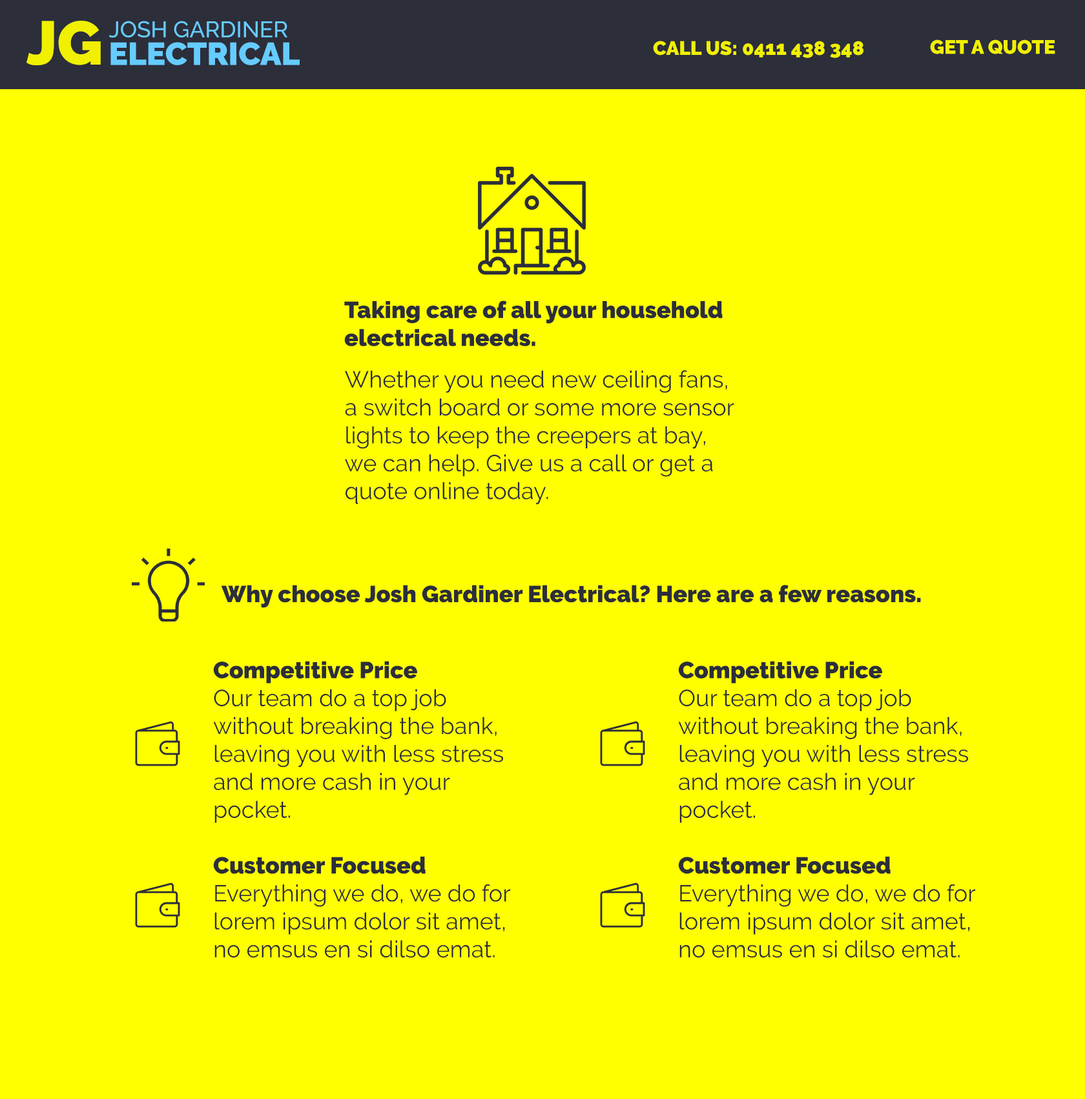
<style>
.page{position:relative;width:1085px;height:1099px;background:#ffff00}
.page>*{position:absolute;margin:0}
.t1{font:61.4px "Raleway-Black";color:#f0f000}
.t2{font:22.6px/27.6px "Raleway-Medium";color:#66ccff}
.t3{font:31.7px/27.6px "Raleway-Black";color:#66ccff}
.t4{font:19.4px "Raleway-Black";color:#f0f000}
.t5{font:23.3px "Raleway-Black";color:#2c2e3a}
.t6{font:23.3px "Raleway-Regular";color:#2c2e3a}
</style>
<div class="page">
<p class="t1" style="left:26px;top:21px;width:75px;height:44px">JG</p>
<p class="t2" style="left:109px;top:21px;width:191px;height:44px">JOSH GARDINER<br><span class="t3">ELECTRICAL</span></p>
<p class="t4" style="left:653px;top:41px;width:211px;height:17px">CALL US: 0411 438 348</p>
<p class="t4" style="left:930px;top:39px;width:126px;height:15px">GET A QUOTE</p>
<p class="t5" style="left:344px;top:300px;width:379px;height:46px">Taking care of all your household electrical needs.</p>
<p class="t6" style="left:345px;top:370px;width:389px;height:134px">Whether you need new ceiling fans, a switch board or some more sensor lights to keep the creepers at bay, we can help. Give us a call or get a quote online today.</p>
<p class="t5" style="left:221px;top:585px;width:700px;height:23px">Why choose Josh Gardiner Electrical? Here are a few reasons.</p>
<p class="t6" style="left:213px;top:661px;width:298px;height:296px"><span class="t5">Competitive Price<br></span>Our team do a top job<br>without breaking the bank, leaving you with less stress and more cash in your pocket.<br><br><span class="t5">Customer Focused<br></span>Everything we do, we do for lorem ipsum dolor sit amet, no emsus en si dilso emat.</p>
<p class="t6" style="left:678px;top:661px;width:298px;height:296px"><span class="t5">Competitive Price<br></span>Our team do a top job<br>without breaking the bank, leaving you with less stress and more cash in your pocket.<br><br><span class="t5">Customer Focused<br></span>Everything we do, we do for lorem ipsum dolor sit amet, no emsus en si dilso emat.</p>
</div>
